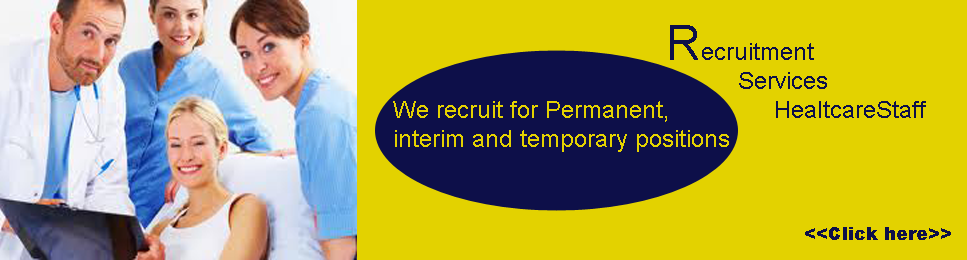
<style>
.page{position:relative;width:967px;height:260px;background:#e3d200}
.page>*{position:absolute;margin:0}
.t1{font:24px "ArialMT";color:#0d0f49}
.t2{font:48px "ArialMT";color:#0d0f49}
.t3{font:24px "ArialMT";color:#e3d200}
.t4{font:18px "Arial-Black";color:#0d0f49}
</style>
<div class="page">
<p class="t1" style="left:670px;top:25px;width:256px;height:93px"><span class="t2">R</span>ecruitment<br>  Services<br>   HealtcareStaff</p>
<p class="t3" style="left:393px;top:101px;width:336px;height:51px">We recruit for Permanent,<br>interim and temporary positions</p>
<p class="t4" style="left:805px;top:227px;width:146px;height:13px">&lt;&lt;Click here&gt;&gt;</p>
</div>
